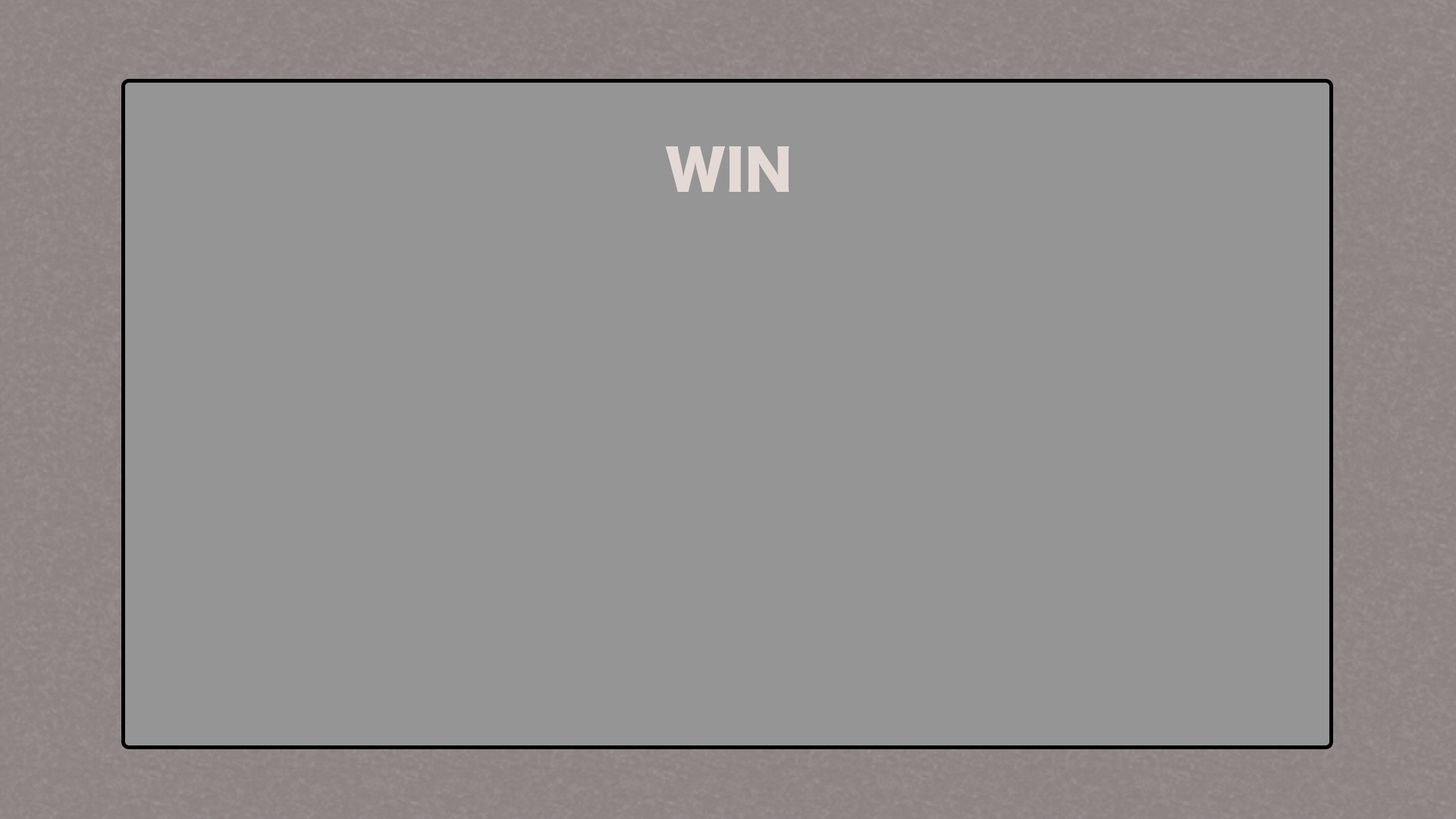
<style>
.page{position:relative;width:1456px;height:819px;background:#959595}
.page>*{position:absolute;margin:0}
.t1{font:54.6px "HiraKakuStd-W8";color:#e4d9d5}
</style>
<div class="page">
<p class="t1" style="left:665px;top:146px;width:124px;height:46px">WIN</p>
</div>
